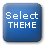
<style>
.page{position:relative;width:45px;height:45px}
.page>*{position:absolute;margin:0}
.t1{font:10px "Verdana";color:#ffffff}
.t2{font:8px "Verdana";color:#ffffff}
</style>
<div class="page">
<p class="t1" style="left:6px;top:11px;width:32px;height:8px">Select</p>
<p class="t2" style="left:8px;top:22px;width:28px;height:6px">THEME</p>
</div>
